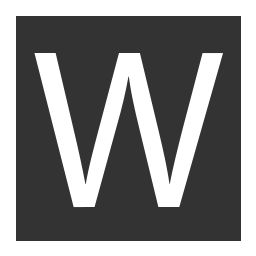
<style>
.page{position:relative;width:256px;height:256px;background:#333333}
.page>*{position:absolute;margin:0}
.t1{font:229.2px "MyriadPro-Regular";color:#ffffff}
</style>
<div class="page">
<p class="t1" style="left:34px;top:53px;width:189px;height:155px">W</p>
</div>
